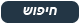
<style>
.page{position:relative;width:80px;height:24px;background:#233645}
.page>*{position:absolute;margin:0}
.t1{font:14px "Arial-BoldItalicMT";color:#fefefe}
</style>
<div class="page">
<p class="t1" style="left:23px;top:7px;width:34px;height:8px">שופיח</p>
</div>
